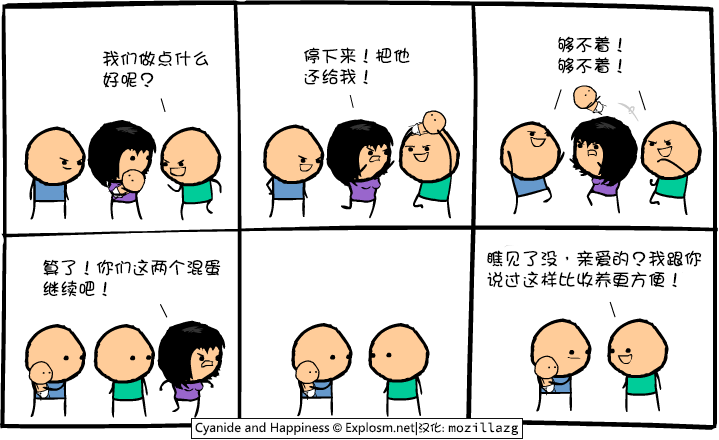
<style>
.page{position:relative;width:719px;height:440px;background:#ffffff}
.page>*{position:absolute;margin:0}
.t1{font:18px/21px "DFGirl";color:#000000}
</style>
<div class="page">
<p class="t1" style="left:558px;top:36px;width:64px;height:38px">够不着！<br>够不着！</p>
<p class="t1" style="left:102px;top:50px;width:107px;height:38px">我们做点什么<br>好呢？</p>
<p class="t1" style="left:304px;top:47px;width:106px;height:38px">停下来！把他<br>还给我！</p>
<p class="t1" style="left:487px;top:250px;width:215px;height:38px">瞧见了没，亲爱的？我跟你<br>说过这样比收养更方便！</p>
<p class="t1" style="left:43px;top:259px;width:178px;height:38px">算了！你们这两个混蛋<br>继续吧！</p>
</div>
